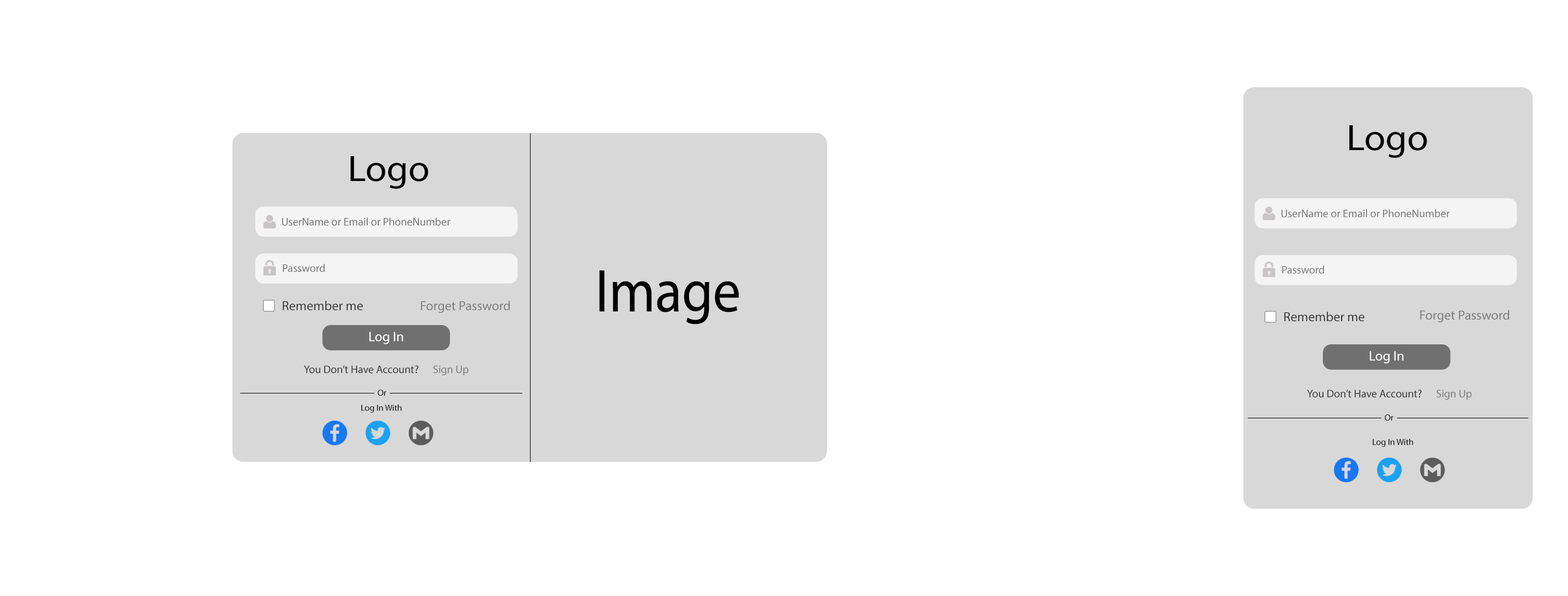
<style>
.page{position:relative;width:1568px;height:596px;background:#ffffff}
.page>*{position:absolute;margin:0}
.t1{font:36.8px "MyriadPro-Regular";color:#000000;scale:1.06 1}
.t2{font:11px "MyriadPro-Regular";color:#777676}
.t3{font:60.8px "MyriadPro-Regular";color:#000000;scale:0.91 1}
.t4{font:13.3px "MyriadPro-Regular";color:#333333}
.t5{font:13.3px "MyriadPro-Regular";color:#7a7a7a}
.t6{font:13.8px "MyriadPro-Regular";color:#ffffff}
.t7{font:11px "MyriadPro-Regular";color:#333333}
.t8{font:11px "MyriadPro-Regular";color:#7a7a7a}
.t9{font:8.8px "MyriadPro-Regular";color:#000000}
</style>
<div class="page">
<p class="t1" style="left:1349px;top:125px;width:78px;height:33px">Logo</p>
<p class="t1" style="left:351px;top:156px;width:77px;height:33px">Logo</p>
<p class="t2" style="left:1281px;top:209px;width:169px;height:9px">UserName or Email or PhoneNumber</p>
<p class="t2" style="left:282px;top:218px;width:169px;height:8px">UserName or Email or PhoneNumber</p>
<p class="t2" style="left:283px;top:264px;width:42px;height:8px">Password</p>
<p class="t2" style="left:1282px;top:266px;width:42px;height:8px">Password</p>
<p class="t3" style="left:599px;top:271px;width:140px;height:54px">Image</p>
<p class="t4" style="left:283px;top:301px;width:80px;height:10px">Remember me</p>
<p class="t5" style="left:421px;top:301px;width:89px;height:12px">Forget Password</p>
<p class="t4" style="left:1284px;top:312px;width:81px;height:10px">Remember me</p>
<p class="t5" style="left:1420px;top:310px;width:89px;height:12px">Forget Password</p>
<p class="t6" style="left:369px;top:332px;width:34px;height:13px">Log In</p>
<p class="t6" style="left:1370px;top:351px;width:33px;height:13px">Log In</p>
<p class="t7" style="left:304px;top:365px;width:115px;height:9px">You Don’t Have Account?</p>
<p class="t8" style="left:433px;top:365px;width:36px;height:11px">Sign Up</p>
<p class="t9" style="left:378px;top:390px;width:8px;height:6px">Or</p>
<p class="t7" style="left:1307px;top:390px;width:115px;height:8px">You Don’t Have Account?</p>
<p class="t8" style="left:1437px;top:390px;width:35px;height:10px">Sign Up</p>
<p class="t9" style="left:361px;top:405px;width:41px;height:8px">Log In With</p>
<p class="t9" style="left:1385px;top:415px;width:9px;height:6px">Or</p>
<p class="t9" style="left:1373px;top:439px;width:40px;height:8px">Log In With</p>
</div>
